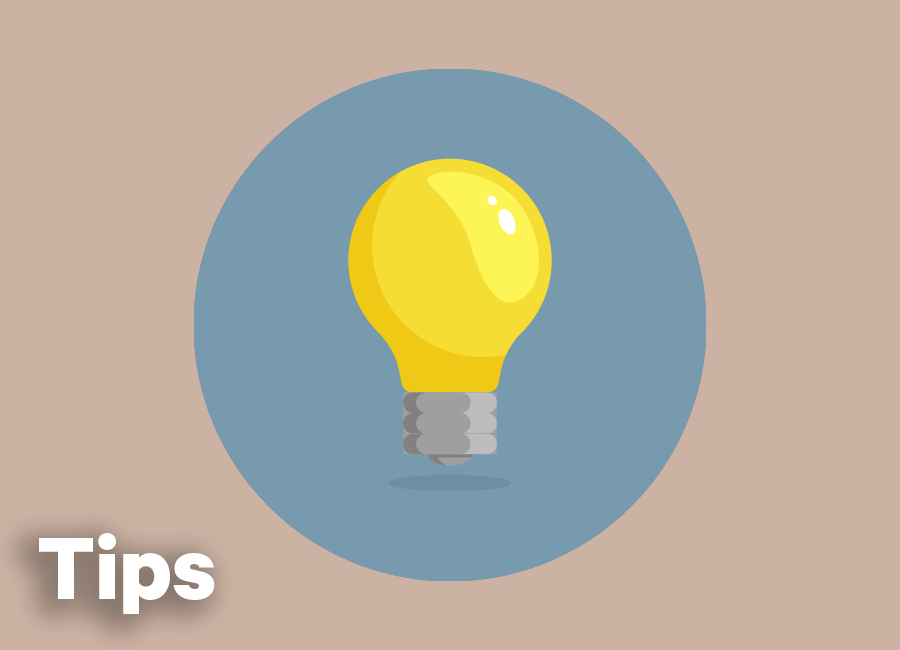
<style>
.page{position:relative;width:900px;height:650px;background:#ccb2a3}
.page>*{position:absolute;margin:0}
.t1{font:100px "Calibre-Bold";color:#ffffff}
</style>
<div class="page">
<p class="t1" style="left:39px;top:533px;width:176px;height:81px">Tips</p>
</div>
